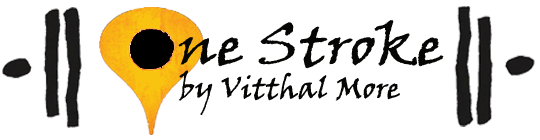
<style>
.page{position:relative;width:540px;height:140px;background:#ffffff}
.page>*{position:absolute;margin:0}
.t1{font:55.6px "VinerHandITC";color:#060706;scale:1.09 1}
.t2{font:30px "VinerHandITC";color:#060706}
</style>
<div class="page">
<p class="t1" style="left:178px;top:20px;width:266px;height:49px">ne Stroke</p>
<p class="t2" style="left:178px;top:70px;width:222px;height:45px">by Vitthal More</p>
</div>
